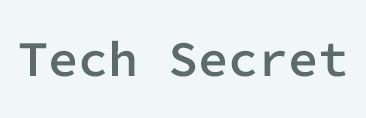
<style>
.page{position:relative;width:366px;height:118px;background:#f1f7f7}
.page>*{position:absolute;margin:0}
.t1{font:50px "SourceCodeRoman_604wght";color:#5d6b6b}
</style>
<div class="page">
<p class="t1" style="left:19px;top:40px;width:327px;height:37px">Tech Secret</p>
</div>
